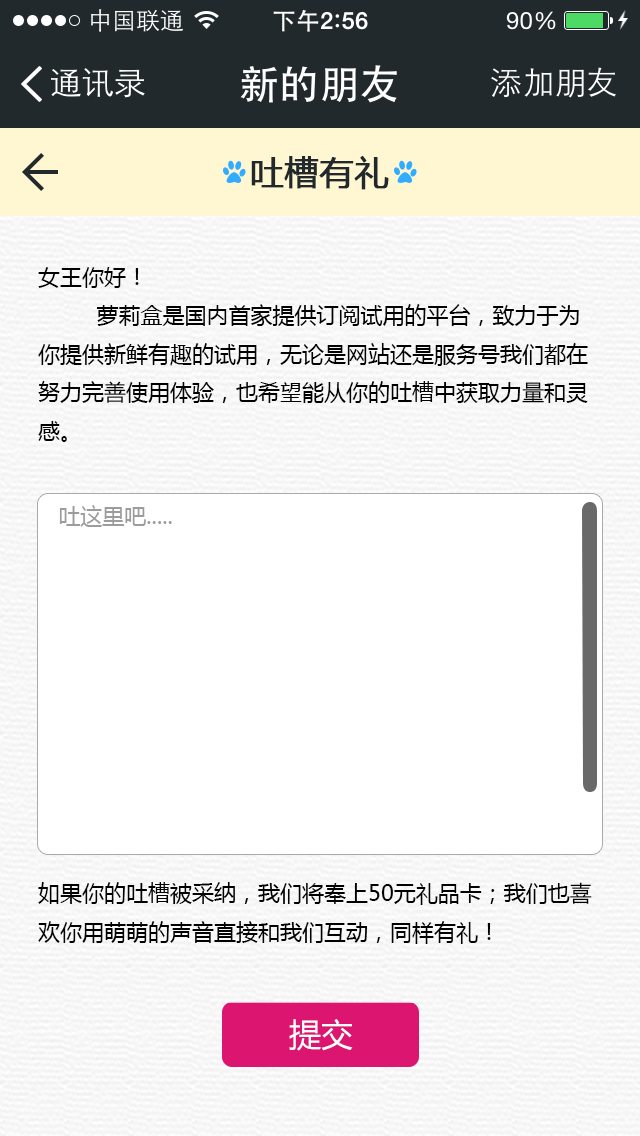
<style>
.page{position:relative;width:640px;height:1136px;background:#ffffff}
.page>*{position:absolute;margin:0}
.t1{font:34px "MicrosoftYaHei";color:#22292c;font-weight:bold}
.t2{font:22px "MicrosoftYaHei";color:#000000}
.t3{font:22px "MicrosoftYaHei";color:#9c9c9c}
.t4{font:32.4px "MicrosoftYaHei";color:#ffffff}
</style>
<div class="page">
<p class="t1" style="left:251px;top:156px;width:138px;height:34px">吐槽有礼</p>
<p class="t2" style="left:38px;top:267px;width:550px;height:175px">女王你好！<br>         萝莉盒是国内首家提供订阅试用的平台，致力于为你提供新鲜有趣的试用，无论是网站还是服务号我们都在努力完善使用体验，也希望能从你的吐槽中获取力量和灵感。</p>
<p class="t3" style="left:59px;top:505px;width:113px;height:22px">吐这里吧.....</p>
<p class="t2" style="left:38px;top:882px;width:554px;height:62px">如果你的吐槽被采纳，我们将奉上50元礼品卡；我们也喜欢你用萌萌的声音直接和我们互动，同样有礼！</p>
<p class="t4" style="left:289px;top:1019px;width:64px;height:32px">提交</p>
</div>
